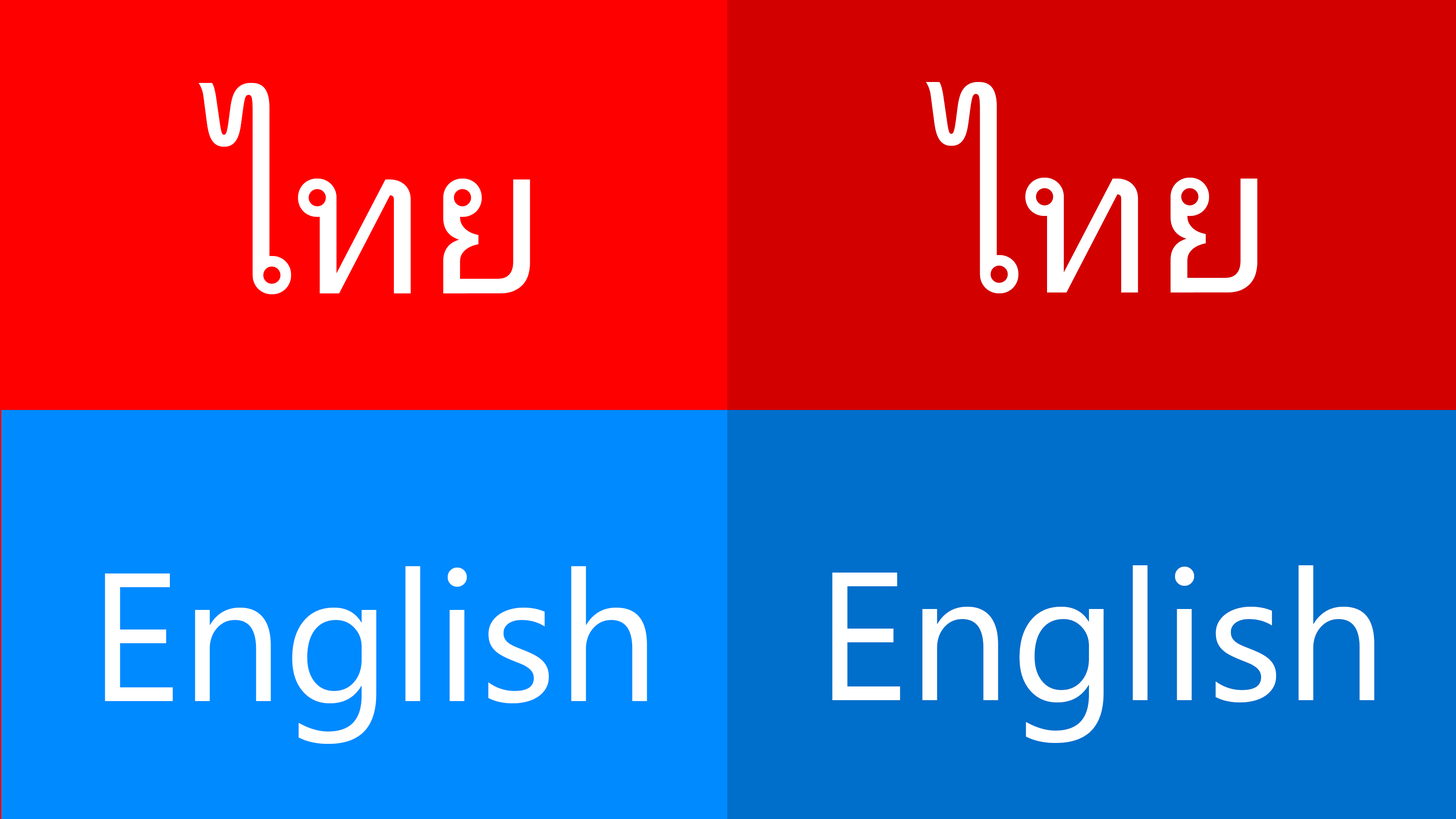
<style>
.page{position:relative;width:1456px;height:819px;background:#ff0000}
.page>*{position:absolute;margin:0}
.t1{font:227.7px "LeelawadeeUI";color:#ffffff}
.t2{font:182.2px "LeelawadeeUI";color:#ffffff}
</style>
<div class="page">
<p class="t1" style="left:199px;top:83px;width:331px;height:211px">ไทย</p>
<p class="t1" style="left:926px;top:82px;width:332px;height:211px">ไทย</p>
<p class="t2" style="left:105px;top:566px;width:542px;height:178px">English</p>
<p class="t2" style="left:832px;top:565px;width:543px;height:178px">English</p>
</div>
